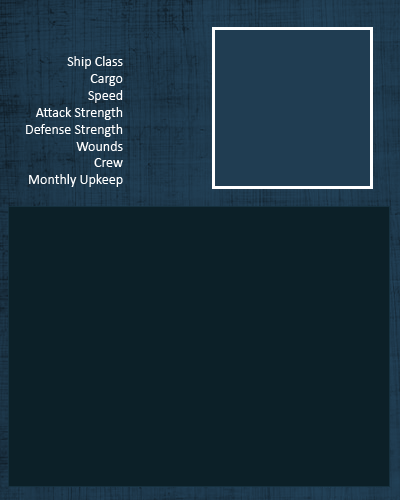
<style>
.page{position:relative;width:400px;height:500px;background:#0c2028}
.page>*{position:absolute;margin:0}
.t1{font:14px "Calibri";color:#ffffff}
</style>
<div class="page">
<p class="t1" style="left:26px;top:56px;width:97px;height:131px;text-align:right">Ship Class<br>Cargo<br>Speed<br>Attack Strength<br>Defense Strength<br>Wounds<br>Crew<br>Monthly Upkeep</p>
</div>
